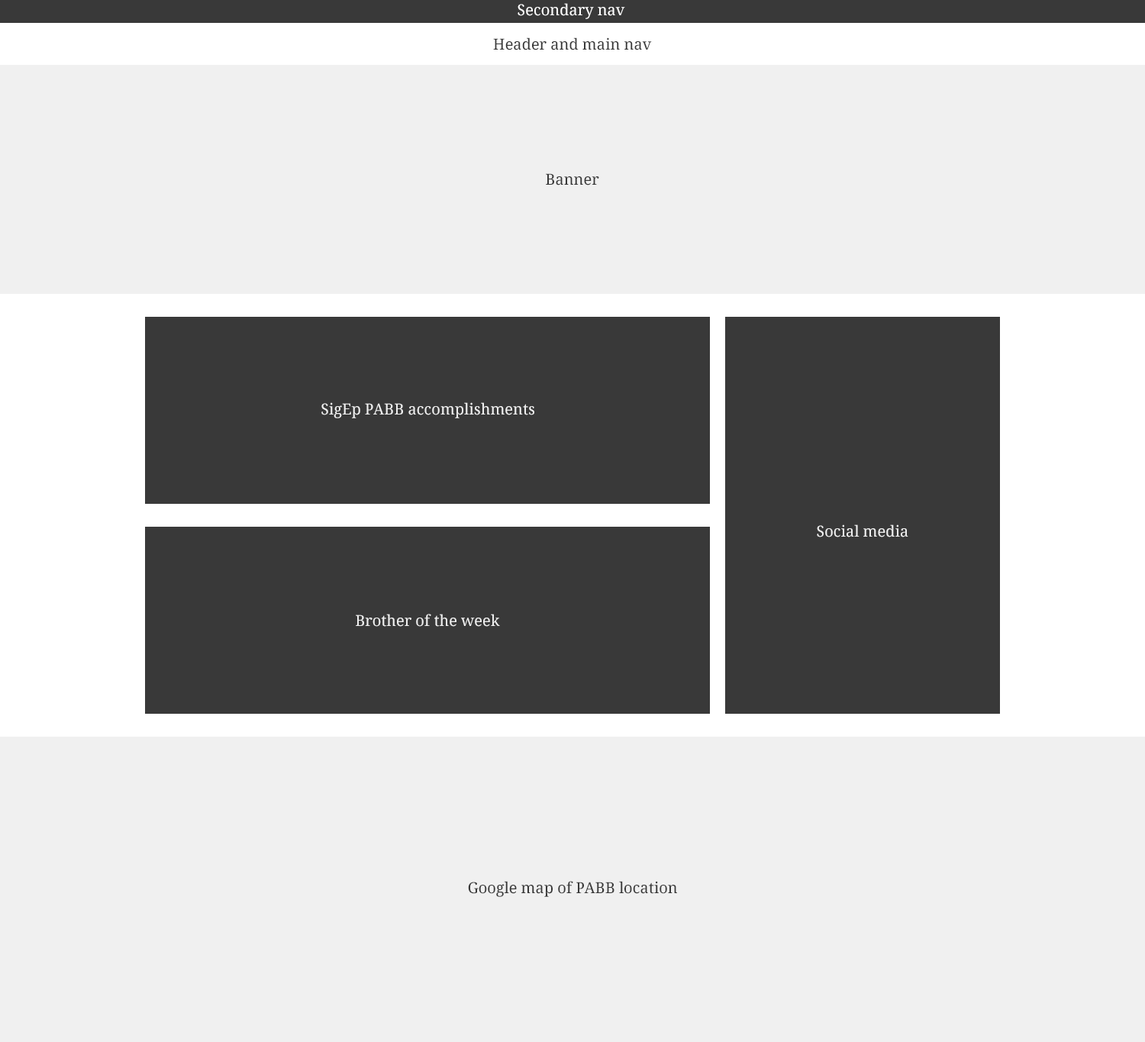
<style>
.page{position:relative;width:1145px;height:1042px;background:#f0f0f0}
.page>*{position:absolute;margin:0}
.t1{font:15.3px "NotoSerif";color:#ffffff}
.t2{font:15.3px "NotoSerif";color:#383838}
.t3{font:15.3px "NotoSerif";color:#f0f0f0}
</style>
<div class="page">
<p class="t1" style="left:517px;top:3px;width:108px;height:16px">Secondary nav</p>
<p class="t2" style="left:493px;top:37px;width:159px;height:13px">Header and main nav</p>
<p class="t2" style="left:546px;top:173px;width:53px;height:12px">Banner</p>
<p class="t3" style="left:321px;top:402px;width:213px;height:16px">SigEp PABB accomplishments</p>
<p class="t3" style="left:817px;top:524px;width:91px;height:13px">Social media</p>
<p class="t3" style="left:356px;top:614px;width:144px;height:13px">Brother of the week</p>
<p class="t2" style="left:468px;top:881px;width:209px;height:16px">Google map of PABB location</p>
</div>
